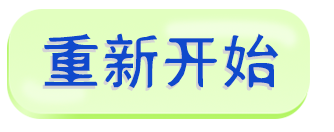
<style>
.page{position:relative;width:334px;height:132px;background:#ffffff}
.page>*{position:absolute;margin:0}
.t1{font:60px "SimHei"}
.t2{font:60px "SimHei";color:#0f49cc}
</style>
<div class="page">
<p class="t1" style="left:42px;top:36px;width:235px;height:55px">重新开始</p>
<p class="t2" style="left:44px;top:33px;width:235px;height:55px">重新开始</p>
</div>
